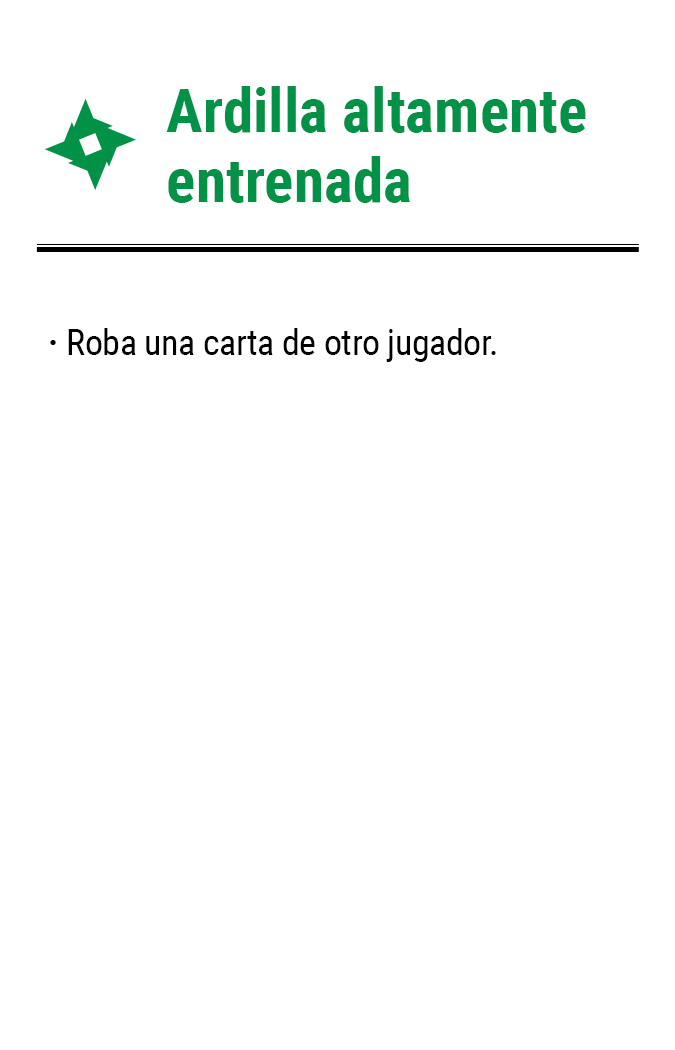
<style>
.page{position:relative;width:675px;height:1050px;background:#ffffff}
.page>*{position:absolute;margin:0}
.t1{font:61.2px/62.9px "RobotoCondensed-Bold";color:#019147}
.t2{font:35.8px "RobotoCondensed-Regular";letter-spacing:-0.01em;color:#000000}
.t3{font:35.8px "RobotoCondensed-Bold";letter-spacing:-0.01em;color:#000000}
</style>
<div class="page">
<p class="t1" style="left:166px;top:86px;width:420px;height:117px">Ardilla altamente<br>entrenada</p>
<p class="t2" style="left:68px;top:328px;width:428px;height:34px">Roba una carta de otro jugador.</p>
<p class="t3" style="left:50px;top:340px;width:6px;height:5px">·</p>
</div>
